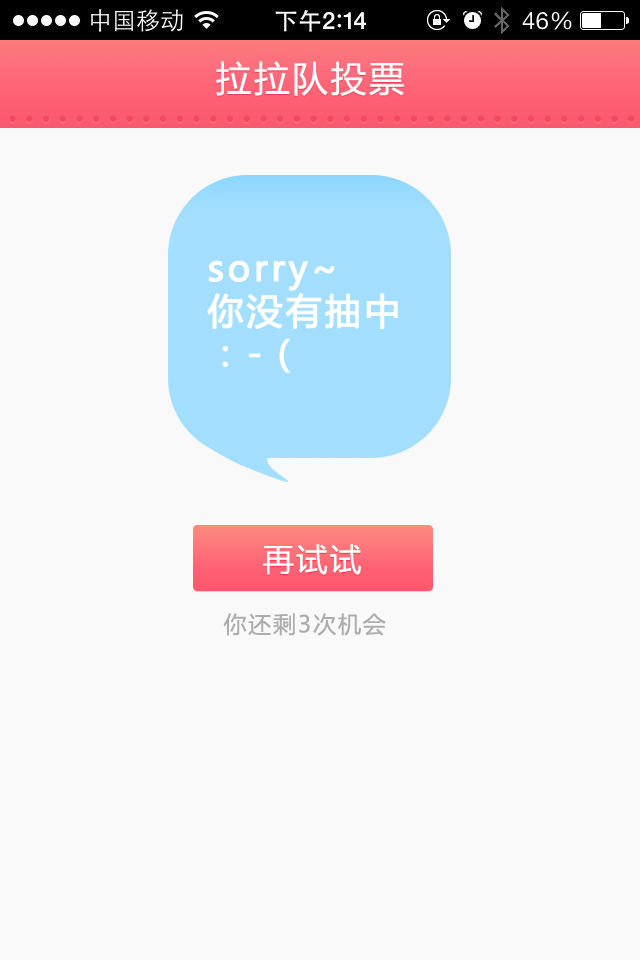
<style>
.page{position:relative;width:640px;height:960px;background:#f9f9f9}
.page>*{position:absolute;margin:0}
.t1{font:35.5px "MicrosoftYaHei";letter-spacing:0.08em;color:#fffefe}
.t2{font:52.1px "MicrosoftYaHei";letter-spacing:0.08em;color:#f3485d}
.t3{font:35.5px "MicrosoftYaHei";letter-spacing:0.08em;color:#ffffff;font-weight:bold}
.t4{font:31.3px "MicrosoftYaHei";letter-spacing:0.08em;color:#ffffff}
.t5{font:23px "MicrosoftYaHei";letter-spacing:0.08em;color:#acacac}
</style>
<div class="page">
<p class="t1" style="left:216px;top:61px;width:188px;height:35px">拉拉队投票</p>
<p class="t2" style="left:9px;top:115px;width:626px;height:8px">......................................</p>
<p class="t3" style="left:207px;top:260px;width:191px;height:113px">sorry~<br>你没有抽中<br>：-（</p>
<p class="t4" style="left:263px;top:544px;width:98px;height:31px">再试试</p>
<p class="t5" style="left:223px;top:613px;width:163px;height:23px">你还剩3次机会</p>
</div>
